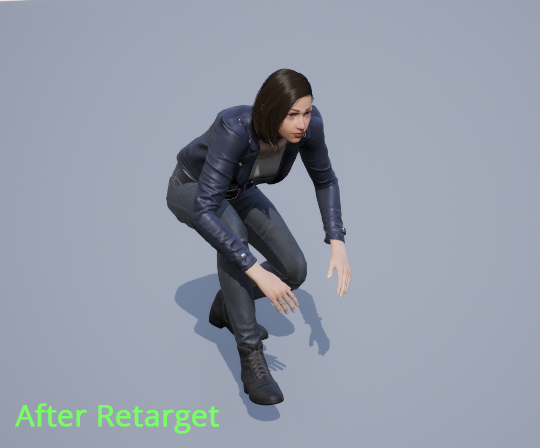
<style>
.page{position:relative;width:540px;height:448px}
.page>*{position:absolute;margin:0}
.t1{font:29.7px "OpenSans-Regular";color:#77ff61;font-weight:bold}
</style>
<div class="page">
<p class="t1" style="left:15px;top:403px;width:204px;height:31px">After Retarget</p>
</div>
